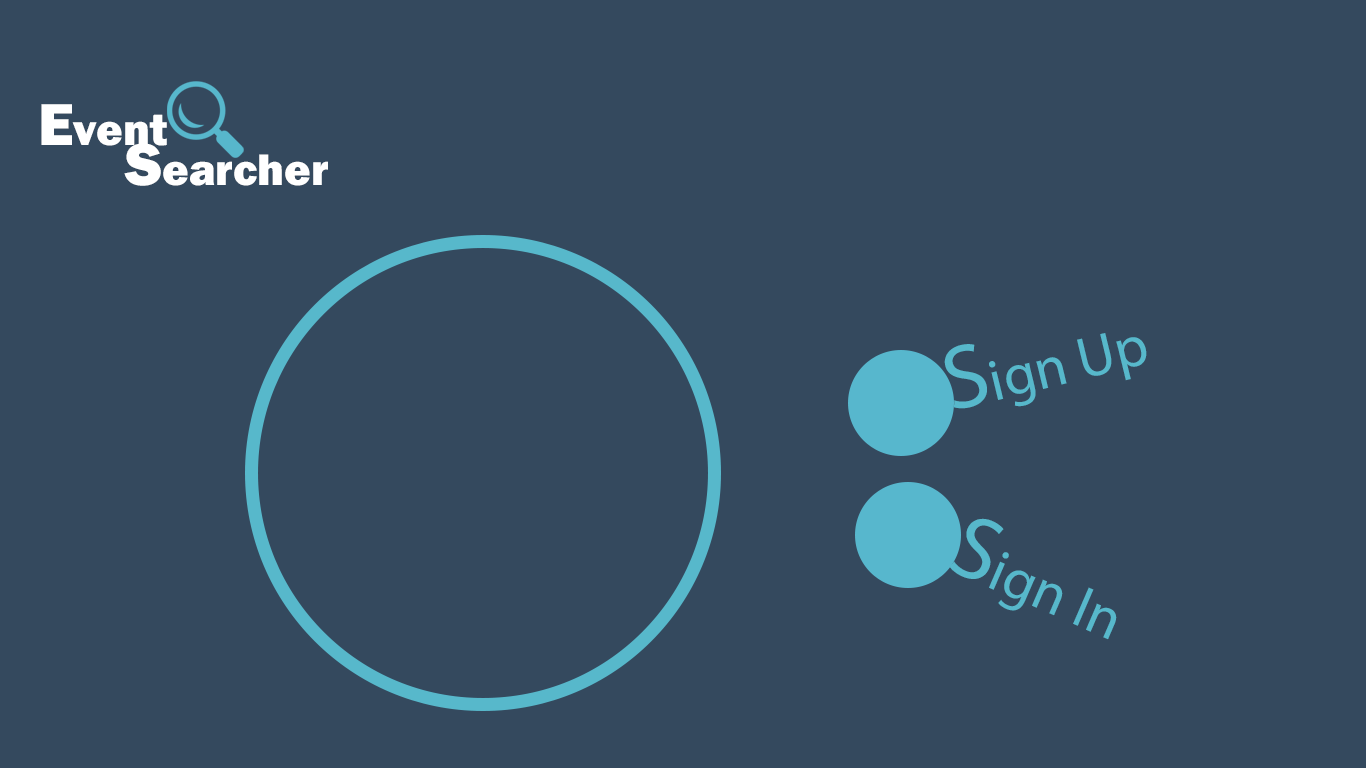
<style>
.page{position:relative;width:1366px;height:768px;background:#34495e}
.page>*{position:absolute;margin:0}
.t1{font:45.7px "FranklinGothic-Heavy";color:#ffffff}
.t2{font:60.9px "FranklinGothic-Heavy";color:#ffffff}
.t3{font:58.3px "MyriadPro-Regular";color:#57b8cb}
.t4{font:90.3px "MyriadPro-Regular";color:#57b8cb}
.t5{font:58.5px "MyriadPro-Regular";color:#57b8cb}
.t6{font:90.4px "MyriadPro-Regular";color:#57b8cb}
</style>
<div class="page">
<p class="t1" style="left:41px;top:104px;width:126px;height:42px"><span class="t2">E</span>vent</p>
<p class="t1" style="left:124px;top:143px;width:204px;height:43px"><span class="t2">S</span>earcher</p>
<p class="t3" style="left:944px;top:333px;width:203px;height:76px;rotate:-14deg"><span class="t4">S</span>ign Up</p>
<p class="t5" style="left:949px;top:518px;width:168px;height:122px;rotate:23deg"><span class="t6">S</span>ign In</p>
</div>
